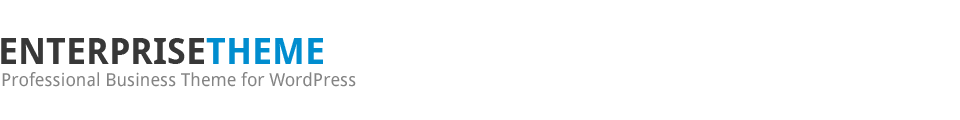
<style>
.page{position:relative;width:960px;height:120px;background:#ffffff}
.page>*{position:absolute;margin:0}
.t1{font:35.9px "DroidSans-Bold";color:#383838}
.t2{font:35.9px "DroidSans-Bold";color:#008dcf}
.t3{font:18px "DroidSans";color:#848484}
</style>
<div class="page">
<p class="t1" style="left:1px;top:38px;width:322px;height:26px">ENTERPRISE<span class="t2">THEME</span></p>
<p class="t3" style="left:2px;top:72px;width:354px;height:15px">Professional Business Theme for WordPress</p>
</div>
